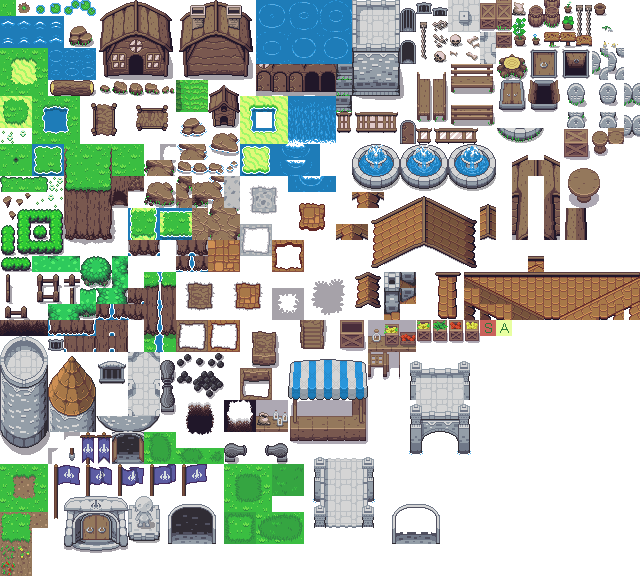
<style>
.page{position:relative;width:640px;height:576px;background:#ffffff}
.page>*{position:absolute;margin:0}
.t1{font:14px "ArialMT";color:#2a7b39}
</style>
<div class="page">
<p class="t1" style="left:485px;top:323px;width:7px;height:10px">S</p>
<p class="t1" style="left:500px;top:323px;width:9px;height:10px">A</p>
</div>
